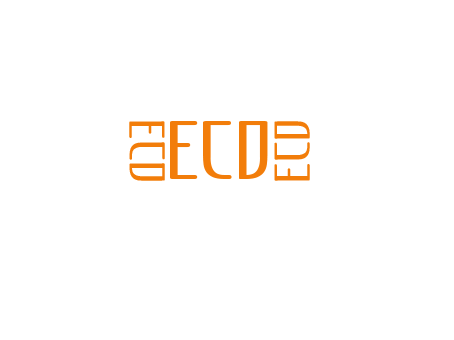
<style>
.page{position:relative;width:454px;height:340px;background:#ffffff}
.page>*{position:absolute;margin:0}
.t1{font:45px "Articulate";color:#f27d0a;scale:1.82 1}
.t2{font:70.4px "OldEnglishTextMT";letter-spacing:0.01em;color:#f27d0a;scale:1.82 1}
.t3{font:74px "Articulate";color:#f27d0a;scale:1.82 1}
</style>
<div class="page">
<p class="t1" style="left:129px;top:121px;width:36px;height:60px;rotate:90deg"><span class="t2"><br></span>ECO</p>
<p class="t3" style="left:170px;top:121px;width:98px;height:58px"><span class="t2"><br></span>ECO</p>
<p class="t1" style="left:274px;top:121px;width:36px;height:60px;rotate:-90deg"><span class="t2"><br></span>ECO</p>
</div>
